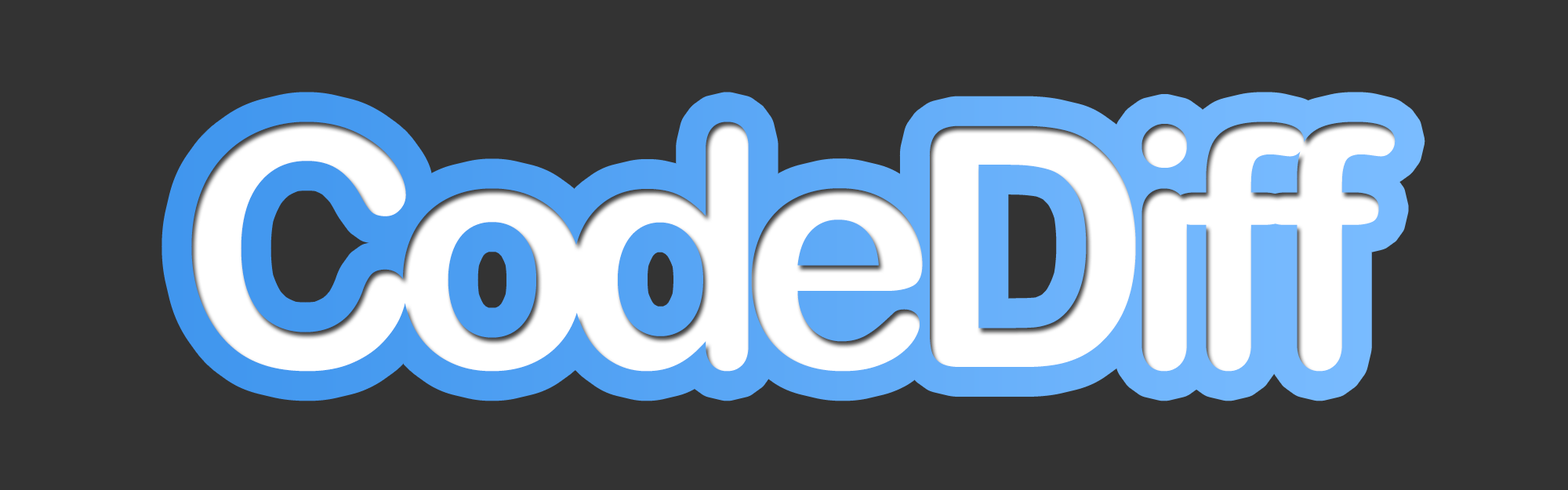
<style>
.page{position:relative;width:1568px;height:490px;background:#333333}
.page>*{position:absolute;margin:0}
.t1{font:336.5px "ArialRoundedMTBold";letter-spacing:-0.1em;color:#ffffff}
</style>
<div class="page">
<p class="t1" style="left:191px;top:122px;width:1205px;height:250px">CodeDiff</p>
</div>
